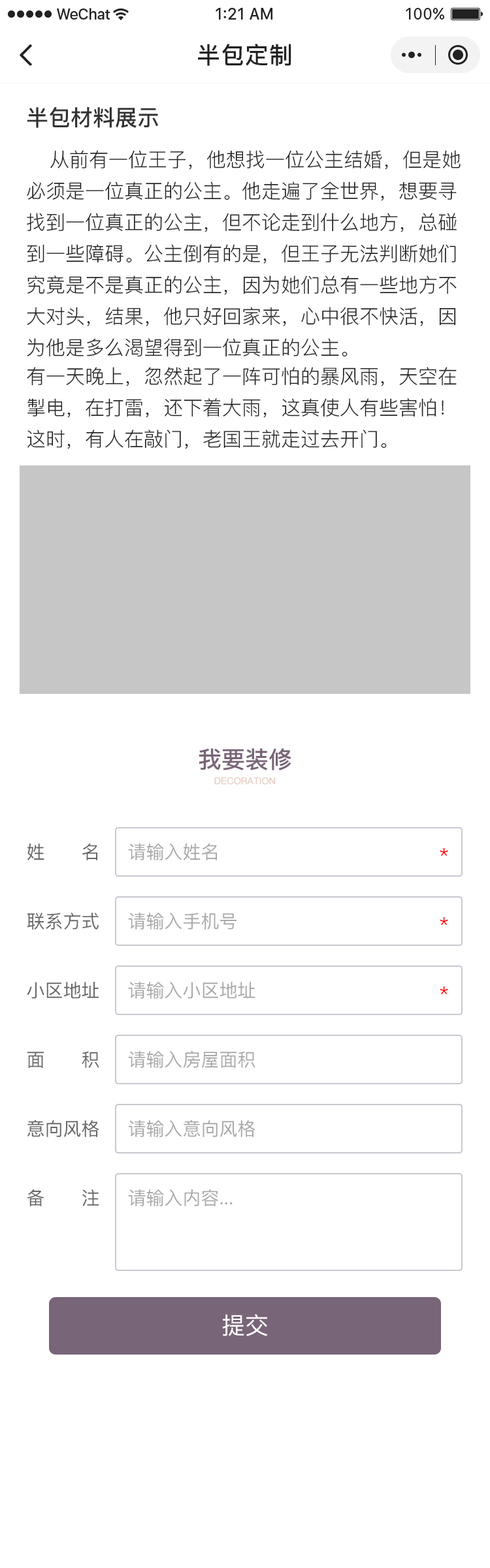
<style>
.page{position:relative;width:490px;height:1568px;background:#ffffff}
.page>*{position:absolute;margin:0}
.t1{font:23.5px "PingFang-SC-Bold";letter-spacing:0.028em;color:#222222}
.t2{font:22.2px "PingFang-SC-Bold";color:#333333}
.t3{font:19.6px/31.3px "PingFang-SC-Regular";color:#222222}
.t4{font:23.5px "PingFang-SC-Bold";color:#786578}
.t5{font:9.1px "PingFang-SC-Regular";color:#e5cec3;font-weight:bold}
.t6{font:18.3px "PingFang-SC-Medium";color:#666666}
.t7{font:18.3px "PingFang-SC-Medium";color:#a9a9a9}
.t8{font:18.3px "PingFang-SC-Medium";color:#ff0000}
.t9{font:23.5px "PingFang-SC-Medium";color:#ffffff}
</style>
<div class="page">
<p class="t1" style="left:198px;top:44px;width:93px;height:22px">半包定制</p>
<p class="t2" style="left:27px;top:106px;width:131px;height:22px">半包材料展示</p>
<p class="t3" style="left:27px;top:150px;width:433px;height:299px">从前有一位王子，他想找一位公主结婚，但是她必须是一位真正的公主。他走遍了全世界，想要寻找到一位真正的公主，但不论走到什么地方，总碰到一些障碍。公主倒有的是，但王子无法判断她们究竟是不是真正的公主，因为她们总有一些地方不大对头，结果，他只好回家来，心中很不快活，因为他是多么渴望得到一位真正的公主。<br>有一天晚上，忽然起了一阵可怕的暴风雨，天空在掣电，在打雷，还下着大雨，这真使人有些害怕！这时，有人在敲门，老国王就走过去开门。</p>
<p class="t4" style="left:198px;top:748px;width:93px;height:22px">我要装修</p>
<p class="t5" style="left:214px;top:777px;width:61px;height:8px">DECORATION</p>
<p class="t6" style="left:27px;top:843px;width:70px;height:17px">姓      名</p>
<p class="t7" style="left:128px;top:843px;width:89px;height:17px">请输入姓名</p>
<p class="t8" style="left:439px;top:848px;width:9px;height:8px">*</p>
<p class="t6" style="left:27px;top:913px;width:72px;height:17px">联系方式</p>
<p class="t7" style="left:128px;top:913px;width:108px;height:17px">请输入手机号</p>
<p class="t8" style="left:439px;top:917px;width:9px;height:9px">*</p>
<p class="t6" style="left:27px;top:982px;width:72px;height:17px">小区地址</p>
<p class="t7" style="left:128px;top:982px;width:127px;height:17px">请输入小区地址</p>
<p class="t8" style="left:439px;top:986px;width:9px;height:9px">*</p>
<p class="t6" style="left:27px;top:1051px;width:72px;height:17px">面      积</p>
<p class="t7" style="left:128px;top:1050px;width:127px;height:18px">请输入房屋面积</p>
<p class="t6" style="left:27px;top:1120px;width:72px;height:17px">意向风格</p>
<p class="t7" style="left:128px;top:1120px;width:127px;height:17px">请输入意向风格</p>
<p class="t6" style="left:27px;top:1189px;width:72px;height:17px">备      注</p>
<p class="t7" style="left:128px;top:1189px;width:104px;height:17px">请输入内容...</p>
<p class="t9" style="left:222px;top:1314px;width:46px;height:22px">提交</p>
</div>
